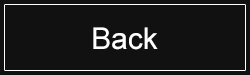
<style>
.page{position:relative;width:250px;height:75px;background:#111111}
.page>*{position:absolute;margin:0}
.t1{font:30px "ArialMT";color:#ffffff}
</style>
<div class="page">
<p class="t1" style="left:93px;top:27px;width:65px;height:23px">Back</p>
</div>
